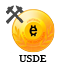
<style>
.page{position:relative;width:64px;height:64px;background:#ffffff}
.page>*{position:absolute;margin:0}
.t1{font:10px "Georgia";color:#000000}
</style>
<div class="page">
<p class="t1" style="left:19px;top:55px;width:28px;height:7px">USDE</p>
</div>
